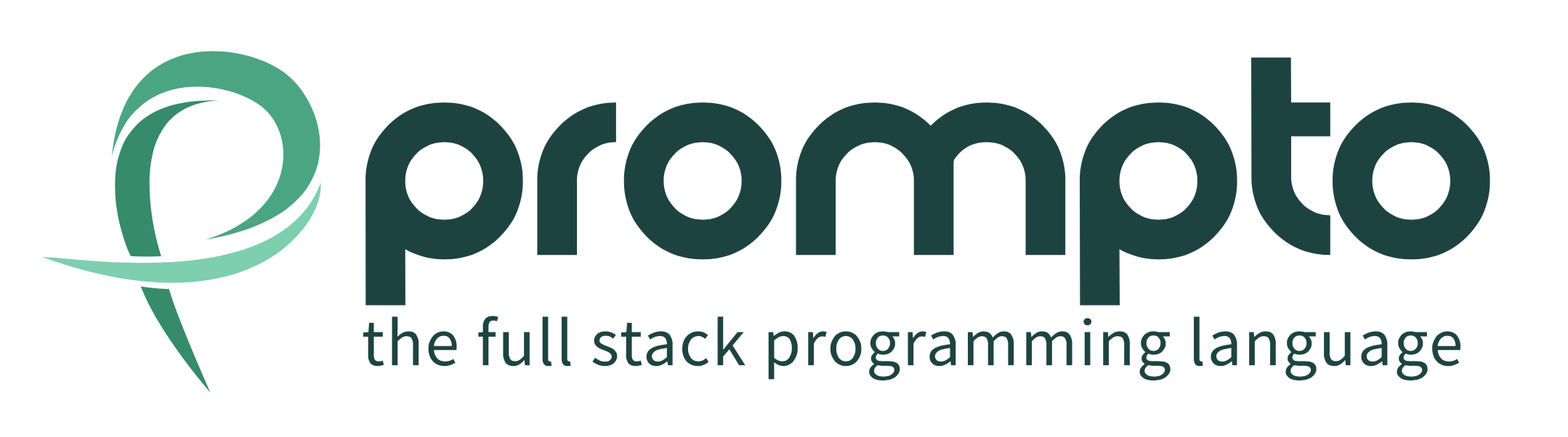
<style>
.page{position:relative;width:1568px;height:437px;background:#ffffff}
.page>*{position:absolute;margin:0}
.t1{font:68.2px "SourceSansPro-Regular";letter-spacing:0.025em;color:#1d4441}
</style>
<div class="page">
<p class="t1" style="left:363px;top:316px;width:1097px;height:65px">the full stack programming language</p>
</div>
